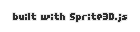
<style>
.page{position:relative;width:140px;height:32px;background:#ffffff}
.page>*{position:absolute;margin:0}
.t1{font:10.6px "04b25";color:#303030;scale:1.2 1}
</style>
<div class="page">
<p class="t1" style="left:13px;top:13px;width:114px;height:9px">built with Sprite3D.js</p>
</div>
